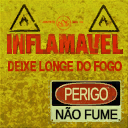
<style>
.page{position:relative;width:128px;height:128px}
.page>*{position:absolute;margin:0}
.t1{font:25.3px "Impact";color:#ce2c08}
.t2{font:12.8px "Helvetica-Narrow-Bold";letter-spacing:-0.04em;color:#bd2400;font-weight:bold;scale:0.95 1}
.t3{font:17.4px "ArialMT";letter-spacing:-0.04em;color:#dee394;scale:0.69 1}
.t4{font:13.7px "ArialMT";letter-spacing:-0.04em;color:#080808;font-weight:bold;scale:0.88 1}
</style>
<div class="page">
<p class="t1" style="left:13px;top:34px;width:12px;height:20px">N</p>
<p class="t1" style="left:86px;top:34px;width:15px;height:20px">V</p>
<p class="t2" style="left:8px;top:61px;width:114px;height:11px">DEIXE LONGE DO FOGO</p>
<p class="t3" style="left:65px;top:87px;width:43px;height:14px">PERIGO</p>
<p class="t4" style="left:55px;top:106px;width:63px;height:14px">NÃO FUME</p>
</div>
